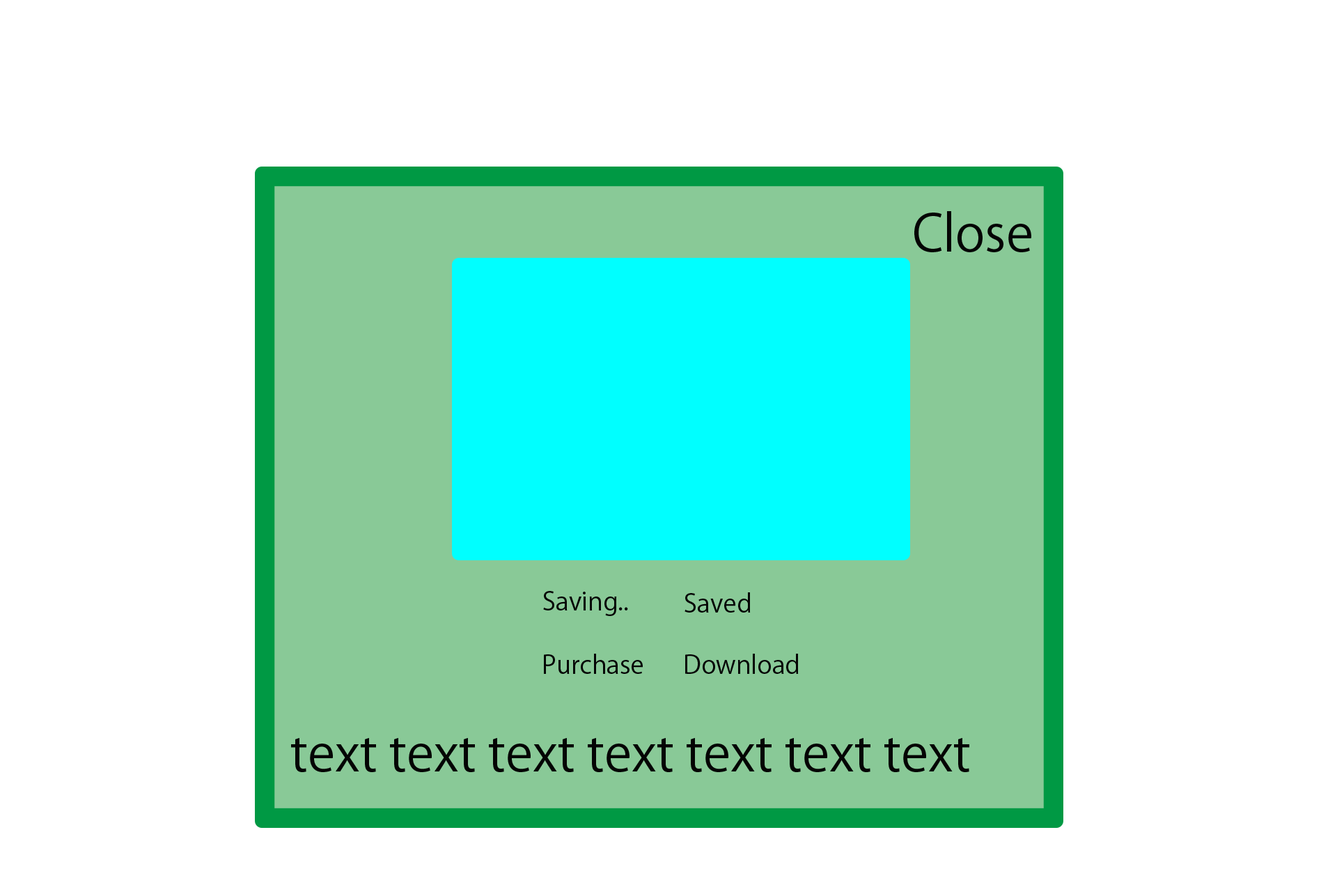
<style>
.page{position:relative;width:1337px;height:892px;background:#ffffff}
.page>*{position:absolute;margin:0}
.t1{font:50.2px "KozGoPr6N-Regular";color:#040404}
.t2{font:25.1px "KozGoPr6N-Regular";color:#040404}
</style>
<div class="page">
<p class="t1" style="left:915px;top:211px;width:117px;height:41px">Close</p>
<p class="t2" style="left:543px;top:591px;width:85px;height:25px">Saving..</p>
<p class="t2" style="left:685px;top:592px;width:66px;height:20px">Saved</p>
<p class="t2" style="left:544px;top:653px;width:99px;height:21px">Purchase</p>
<p class="t2" style="left:685px;top:653px;width:114px;height:21px">Download</p>
<p class="t1" style="left:291px;top:738px;width:679px;height:34px">text text text text text text text</p>
</div>
